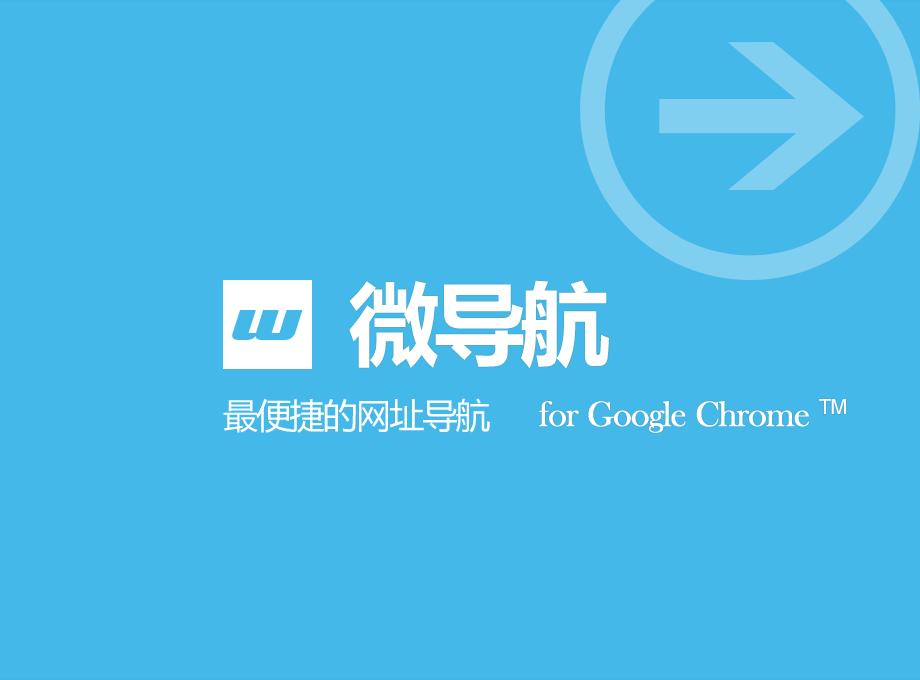
<style>
.page{position:relative;width:920px;height:680px;background:#44b8e9}
.page>*{position:absolute;margin:0}
.t1{font:90px "MicrosoftYaHei-Bold";letter-spacing:-0.05em;color:#ffffff}
.t2{font:90px "Magneto-Bold";letter-spacing:-0.05em;color:#44b8e9}
.t3{font:60px "MicrosoftYaHei";letter-spacing:-0.05em;color:#ffffff}
.t4{font:36px "BaskOldFace";letter-spacing:-0.05em;color:#ffffff;font-weight:bold}
.t5{font:36px "ArialMT";letter-spacing:-0.05em;color:#ffffff}
</style>
<div class="page">
<p class="t1" style="left:349px;top:280px;width:260px;height:89px">微导航</p>
<p class="t2" style="left:232px;top:310px;width:71px;height:30px">w</p>
<p class="t3" style="left:223px;top:398px;width:267px;height:35px">最便捷的网址导航</p>
<p class="t4" style="left:539px;top:399px;width:307px;height:34px">for Google Chrome <span class="t5">TM</span></p>
</div>
